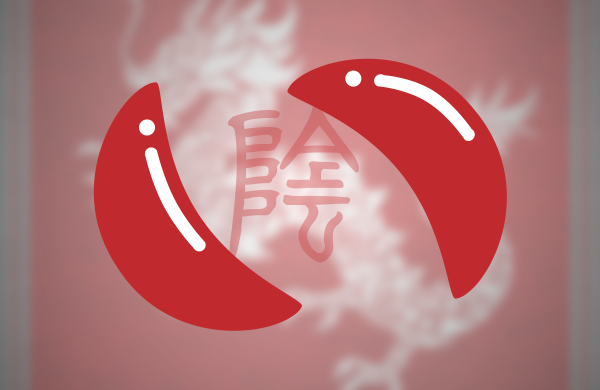
<style>
.page{position:relative;width:600px;height:390px}
.page>*{position:absolute;margin:0}
.t1{font:175px "FZXZTFW--GB1-0";letter-spacing:0.1em;scale:1.37 1}
</style>
<div class="page">
<p class="t1" style="left:227px;top:105px;width:132px;height:158px">阴</p>
</div>
